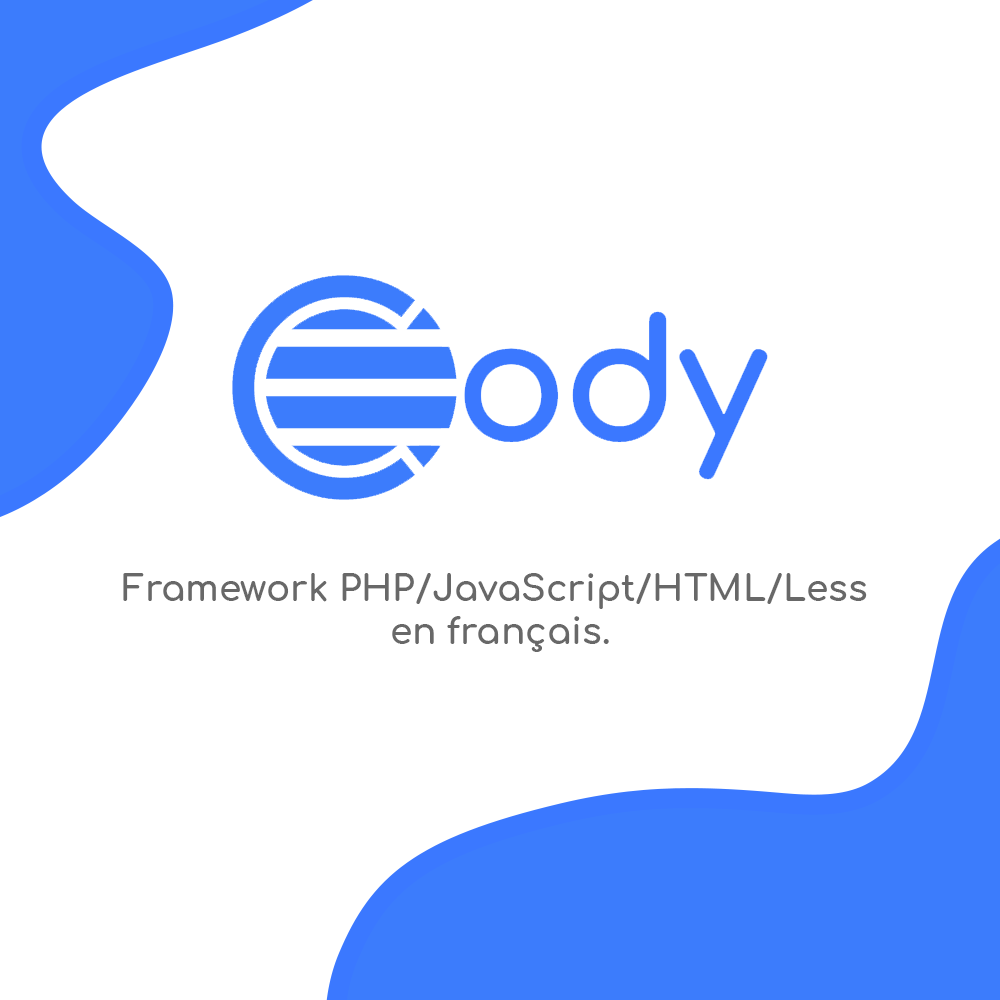
<style>
.page{position:relative;width:1000px;height:1000px;background:#ffffff}
.page>*{position:absolute;margin:0}
.t1{font:36px "Comfortaa-Bold";color:#686868;font-weight:bold;font-style:italic}
</style>
<div class="page">
<p class="t1" style="left:123px;top:573px;width:744px;height:79px;text-align:center">Framework PHP/JavaScript/HTML/Less <br>en français.</p>
</div>
